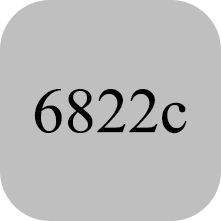
<style>
.page{position:relative;width:221px;height:221px;background:#bfbfbf}
.page>*{position:absolute;margin:0}
.t1{font:63.9px "TimesNewRomanPSMT";color:#000000}
</style>
<div class="page">
<p class="t1" style="left:34px;top:89px;width:153px;height:45px">6822с</p>
</div>
